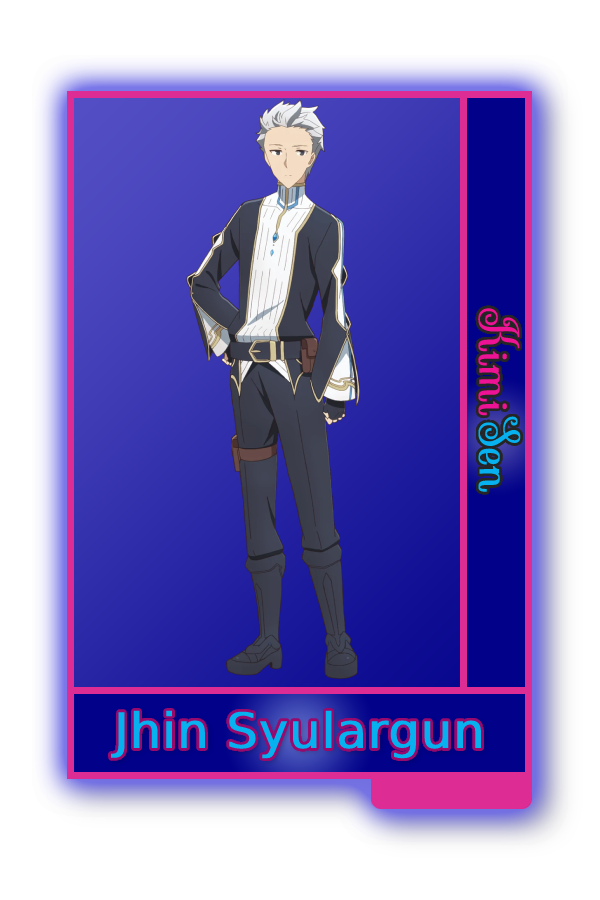
<style>
.page{position:relative;width:600px;height:900px;background:#ffffff}
.page>*{position:absolute;margin:0}
.t1{font:48.8px "Sevillana-Regular";color:#ee1294;font-weight:bold}
.t2{font:48.8px "Sevillana-Regular";color:#07b0ef;font-weight:bold}
.t3{font:49px "CoolveticaRg-Regular";color:#07b0ef;font-weight:bold}
</style>
<div class="page">
<p class="t1" style="left:478px;top:308px;width:43px;height:184px;rotate:90deg">Kimi<span class="t2">Sen</span></p>
<p class="t3" style="left:111px;top:710px;width:370px;height:49px">Jhin Syulargun</p>
</div>
